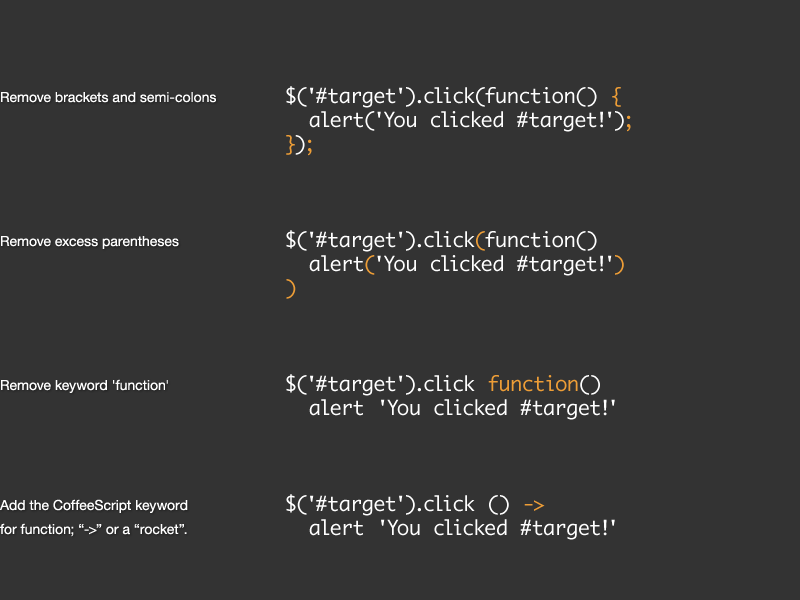
<style>
.page{position:relative;width:800px;height:600px;background:#333333}
.page>*{position:absolute;margin:0}
.t1{font:20px "Monaco";color:#ffffff}
.t2{font:20px "Monaco";color:#ed9d36}
.t3{font:14px/24px "HelveticaNeue";color:#ffffff}
</style>
<div class="page">
<p class="t1" style="left:286px;top:86px;width:345px;height:454px">$('#target').click(function() <span class="t2">{<br></span>  alert('You clicked #target!')<span class="t2">;<br>}</span>)<span class="t2">;<br><br><br><br></span>$('#target').click<span class="t2">(</span>function() <br>  alert<span class="t2">(</span>'You clicked #target!'<span class="t2">)<br>)<br><br><br><br></span>$('#target').click <span class="t2">function</span>() <br>  alert 'You clicked #target!'<br><br><br><br>$('#target').click () <span class="t2">-&gt;</span> <br>  alert 'You clicked #target!'</p>
<p class="t3" style="left:0px;top:92px;width:216px;height:445px">Remove brackets and semi-colons<br><br><br><br><br><br>Remove excess parentheses<br><br><br><br><br><br>Remove keyword 'function'<br><br><br><br><br>Add the CoffeeScript keyword<br>for function; “-&gt;” or a “rocket”.</p>
</div>
